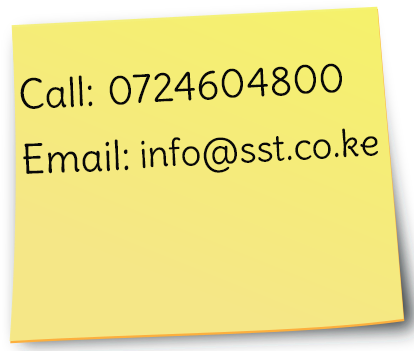
<style>
.page{position:relative;width:414px;height:351px}
.page>*{position:absolute;margin:0}
.t1{font:40px "Delius-Regular";color:#080808}
.t2{font:37.3px "Delius-Regular";color:#080808}
</style>
<div class="page">
<p class="t1" style="left:109px;top:63px;width:233px;height:42px;rotate:-3deg">0724604800</p>
<p class="t1" style="left:20px;top:75px;width:73px;height:34px;rotate:-3deg">Call:</p>
<p class="t2" style="left:141px;top:128px;width:237px;height:45px;rotate:-3deg">info@sst.co.ke</p>
<p class="t1" style="left:23px;top:139px;width:106px;height:35px;rotate:-3deg">Email:</p>
</div>
